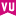
<style>
.page{position:relative;width:16px;height:16px;background:#cf0979}
.page>*{position:absolute;margin:0}
.t1{font:16.7px "Futura-CondensedMedium";letter-spacing:0.05em;color:#ffffff;scale:1.03 1}
</style>
<div class="page">
<p class="t1" style="left:1px;top:2px;width:14px;height:10px">vu</p>
</div>
